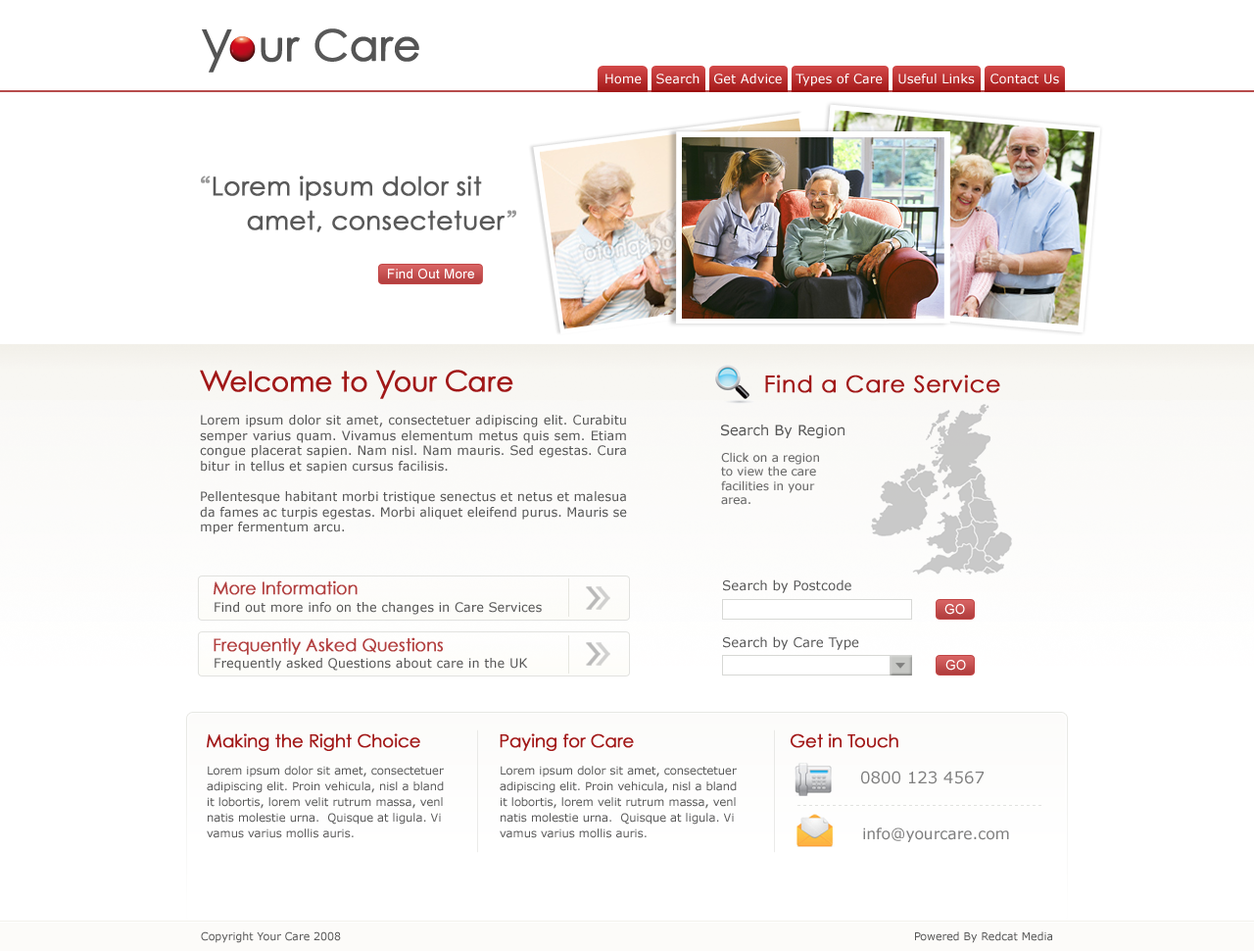
<style>
.page{position:relative;width:1254px;height:951px;background:#ffffff}
.page>*{position:absolute;margin:0}
.t1{font:42.1px "CenturyGothic";font-weight:bold}
.t2{font:42.1px "CenturyGothic";color:#545454;font-weight:bold}
.t3{font:12.7px "Verdana";color:#ffffff}
.t4{font:25.5px "CenturyGothic";color:#595959;font-weight:bold}
.t5{font:25.5px/29.4px "Georgia";color:#999999;font-weight:bold}
.t6{font:25.5px "CenturyGothic";letter-spacing:0.06em;color:#595959;font-weight:bold}
.t7{font:25.5px/34.3px "Georgia";letter-spacing:-0.02em;color:#999999;font-weight:bold}
.t8{font:13.2px "ArialMT";letter-spacing:0.02em;color:#ffffff}
.t9{font:27.3px "CenturyGothic";letter-spacing:-0.02em;color:#970000;font-weight:bold}
.t10{font:39.1px "CenturyGothic";letter-spacing:-0.08em;color:#970000}
.t11{font:39.1px "CenturyGothic";letter-spacing:-0.04em;color:#970000}
.t12{font:27.3px "CenturyGothic";color:#970000;font-weight:bold}
.t13{font:23px "CenturyGothic";letter-spacing:0.02em;color:#980000;font-weight:bold}
.t14{font:12.7px "Verdana";color:#575757}
.t15{font:14.2px "Verdana";color:#575757}
.t16{font:11.8px "Verdana";color:#6b6b6b}
.t17{font:17.2px "CenturyGothic";letter-spacing:-0.02em;color:#b13f3f;font-weight:bold}
.t18{font:13.2px "Verdana";color:#575757}
.t19{font:17.2px "CenturyGothic";letter-spacing:-0.02em;color:#b23f3f;font-weight:bold}
.t20{font:17.6px "CenturyGothic";letter-spacing:-0.02em;color:#a21919;font-weight:bold}
.t21{font:11.3px/15.7px "Verdana";color:#575757}
.t22{font:16.2px "Verdana";color:#7f7f7f}
.t23{font:15.2px "Verdana";color:#808080}
.t24{font:10.8px "Verdana";color:#575757}
</style>
<div class="page">
<p class="t1" style="left:231px;top:36px;width:69px;height:27px">our</p>
<p class="t2" style="left:351px;top:36px;width:68px;height:26px">are</p>
<p class="t3" style="left:606px;top:74px;width:453px;height:12px">Home   Search   Get Advice   Types of Care    Useful Links   Contact Us</p>
<p class="t4" style="left:201px;top:175px;width:315px;height:57px;text-align:justify"><span class="t5">“</span>Lorem ipsum dolor sit <br>      amet, consectetue<span class="t6">r</span><span class="t7">”</span></p>
<p class="t8" style="left:388px;top:269px;width:86px;height:10px">Find Out More</p>
<p class="t9" style="left:200px;top:369px;width:314px;height:30px;opacity:0.9"><span class="t10">w</span>elcome to <span class="t10">y</span>our <span class="t11">c</span><span class="t12">are</span></p>
<p class="t13" style="left:765px;top:374px;width:236px;height:19px;opacity:0.9">Find a Care Service</p>
<p class="t14" style="left:200px;top:415px;width:427px;height:119px;text-align:justify">Lorem ipsum dolor sit amet, consectetuer adipiscing elit. Curabitu <br>semper varius quam. Vivamus elementum metus quis sem. Etiam <br>congue placerat sapien. Nam nisl. Nam mauris. Sed egestas. Cura<br>bitur in tellus et sapien cursus facilisis. <br><br>Pellentesque habitant morbi tristique senectus et netus et malesua<br>da fames ac turpis egestas. Morbi aliquet eleifend purus. Mauris se<br>mper fermentum arcu.</p>
<p class="t15" style="left:721px;top:424px;width:124px;height:14px">Search By Region</p>
<p class="t16" style="left:721px;top:452px;width:98px;height:53px;text-align:justify">Click on a region <br>to view the care <br>facilities in your <br>area.</p>
<p class="t17" style="left:214px;top:580px;width:144px;height:15px">More Information</p>
<p class="t18" style="left:723px;top:579px;width:129px;height:14px">Search by Postcode</p>
<p class="t14" style="left:215px;top:602px;width:327px;height:12px">Find out more info on the changes in Care Services</p>
<p class="t8" style="left:945px;top:604px;width:20px;height:10px">GO</p>
<p class="t19" style="left:214px;top:637px;width:229px;height:18px">Frequently Asked Questions</p>
<p class="t18" style="left:723px;top:636px;width:136px;height:14px">Search by Care Type</p>
<p class="t14" style="left:215px;top:658px;width:313px;height:12px">Frequently asked Questions about care in the UK</p>
<p class="t8" style="left:946px;top:660px;width:20px;height:10px">GO</p>
<p class="t20" style="left:207px;top:733px;width:213px;height:18px">Making the Right Choice</p>
<p class="t20" style="left:500px;top:733px;width:134px;height:18px">Paying for Care</p>
<p class="t20" style="left:791px;top:733px;width:108px;height:15px">Get in Touch</p>
<p class="t21" style="left:207px;top:765px;width:237px;height:73px;text-align:justify">Lorem ipsum dolor sit amet, consectetuer <br>adipiscing elit. Proin vehicula, nisl a bland<br>it lobortis, lorem velit rutrum massa, venl<br>natis molestie urna.  Quisque at ligula. Vi<br>vamus varius mollis auris.</p>
<p class="t21" style="left:500px;top:765px;width:237px;height:73px;text-align:justify">Lorem ipsum dolor sit amet, consectetuer <br>adipiscing elit. Proin vehicula, nisl a bland<br>it lobortis, lorem velit rutrum massa, venl<br>natis molestie urna.  Quisque at ligula. Vi<br>vamus varius mollis auris.</p>
<p class="t22" style="left:861px;top:770px;width:123px;height:14px">0800 123 4567</p>
<p class="t23" style="left:863px;top:827px;width:146px;height:15px">info@yourcare.com</p>
<p class="t24" style="left:201px;top:931px;width:140px;height:12px">Copyright Your Care 2008</p>
<p class="t24" style="left:915px;top:931px;width:138px;height:12px">Powered By Redcat Media</p>
</div>
